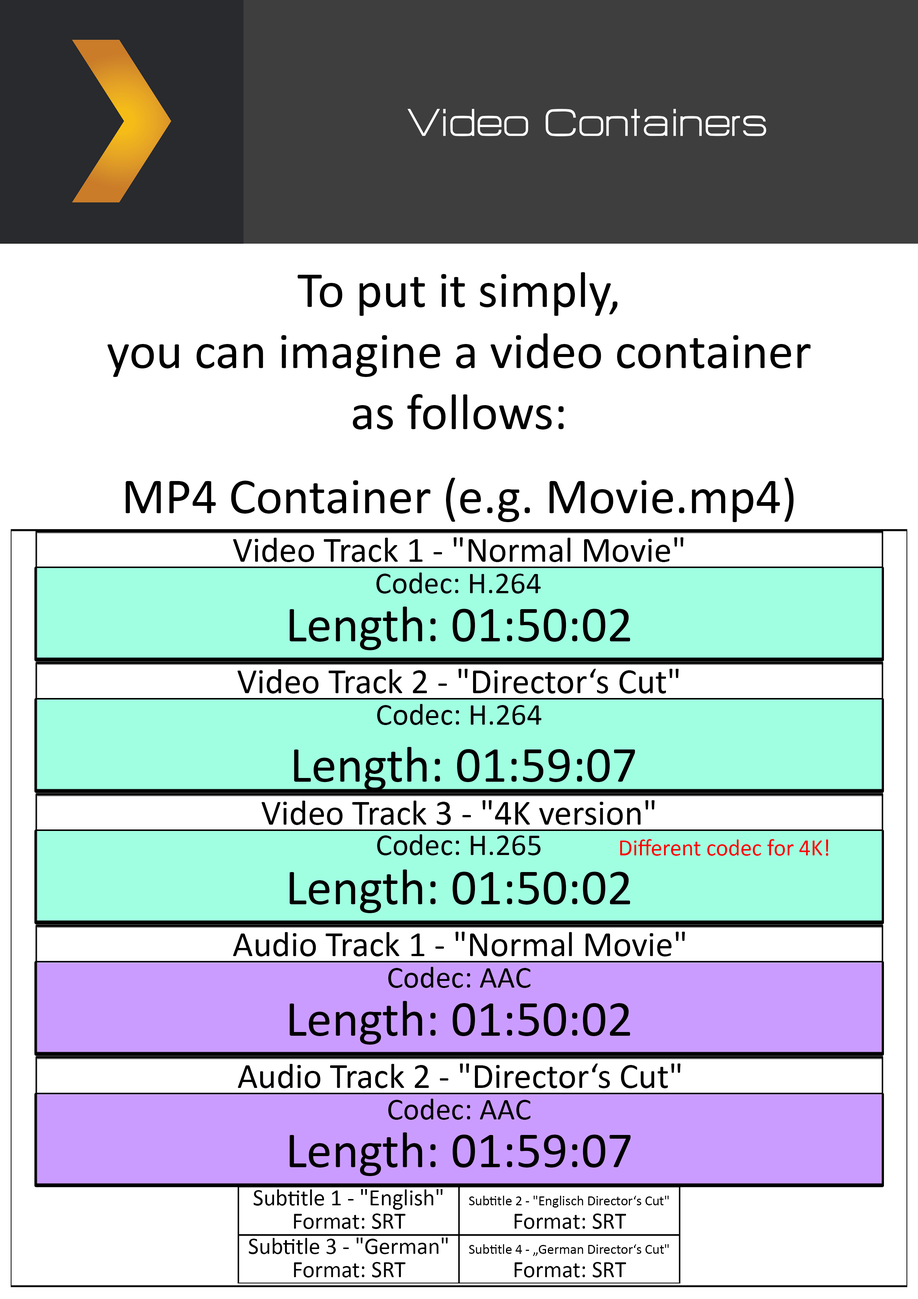
<style>
.page{position:relative;width:918px;height:1299px;background:#ffffff}
.page>*{position:absolute;margin:0}
.t1{font:47.8px "HURTMOLDPersonalUse-Regular";color:#ffffff}
.t2{font:50.9px "Calibri";color:#000000}
.t3{font:35.5px "Calibri";color:#000000}
.t4{font:30.9px "Calibri";color:#000000}
.t5{font:23.1px "Calibri";color:#ff0000}
.t6{font:23.1px "Calibri";color:#000000}
.t7{font:13.9px "Calibri";color:#000000}
</style>
<div class="page">
<p class="t1" style="left:408px;top:109px;width:358px;height:27px">Video Containers</p>
<p class="t2" style="left:107px;top:272px;width:704px;height:157px;text-align:center">To put it simply,<br>you can imagine a video container<br>as follows:</p>
<p class="t2" style="left:126px;top:478px;width:668px;height:44px">MP4 Container (e.g. Movie.mp4)</p>
<p class="t3" style="left:233px;top:537px;width:451px;height:25px">Video Track 1 - "Normal Movie"</p>
<p class="t4" style="left:377px;top:572px;width:164px;height:21px">Codec: H.264</p>
<p class="t2" style="left:290px;top:606px;width:340px;height:44px">Length: 01:50:02</p>
<p class="t3" style="left:237px;top:669px;width:442px;height:24px">Video Track 2 - "Director‘s Cut"</p>
<p class="t4" style="left:377px;top:704px;width:165px;height:21px">Codec: H.264</p>
<p class="t2" style="left:294px;top:747px;width:341px;height:43px">Length: 01:59:07</p>
<p class="t3" style="left:261px;top:800px;width:394px;height:25px">Video Track 3 - "4K version"</p>
<p class="t4" style="left:377px;top:834px;width:164px;height:21px">Codec: H.265</p>
<p class="t5" style="left:620px;top:839px;width:209px;height:17px">Different codec for 4K!</p>
<p class="t2" style="left:290px;top:869px;width:340px;height:44px">Length: 01:50:02</p>
<p class="t3" style="left:233px;top:931px;width:452px;height:25px">Audio Track 1 - "Normal Movie"</p>
<p class="t4" style="left:388px;top:967px;width:143px;height:21px">Codec: AAC</p>
<p class="t2" style="left:290px;top:1001px;width:340px;height:43px">Length: 01:50:02</p>
<p class="t3" style="left:238px;top:1063px;width:443px;height:25px">Audio Track 2 - "Director‘s Cut"</p>
<p class="t4" style="left:388px;top:1098px;width:143px;height:22px">Codec: AAC</p>
<p class="t2" style="left:290px;top:1132px;width:341px;height:44px">Length: 01:59:07</p>
<p class="t6" style="left:254px;top:1189px;width:189px;height:21px">Subtitle 1 - "English"</p>
<p class="t7" style="left:469px;top:1195px;width:200px;height:12px">Subtitle 2 - "Englisch Director‘s Cut"</p>
<p class="t6" style="left:294px;top:1213px;width:112px;height:16px">Format: SRT</p>
<p class="t6" style="left:515px;top:1213px;width:111px;height:16px">Format: SRT</p>
<p class="t6" style="left:249px;top:1237px;width:199px;height:17px">Subtitle 3 - "German"</p>
<p class="t7" style="left:469px;top:1244px;width:200px;height:12px">Subtitle 4 - „German Director‘s Cut"</p>
<p class="t6" style="left:294px;top:1262px;width:112px;height:15px">Format: SRT</p>
<p class="t6" style="left:515px;top:1262px;width:111px;height:15px">Format: SRT</p>
</div>
